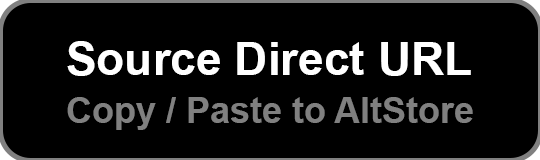
<style>
.page{position:relative;width:540px;height:160px;background:#000000}
.page>*{position:absolute;margin:0}
.t1{font:46px "Arial-BoldMT";color:#ffffff}
.t2{font:36px "Arial-BoldMT";color:#808080}
</style>
<div class="page">
<p class="t1" style="left:67px;top:41px;width:404px;height:35px">Source Direct URL</p>
<p class="t2" style="left:67px;top:97px;width:406px;height:33px">Copy / Paste to AltStore</p>
</div>
